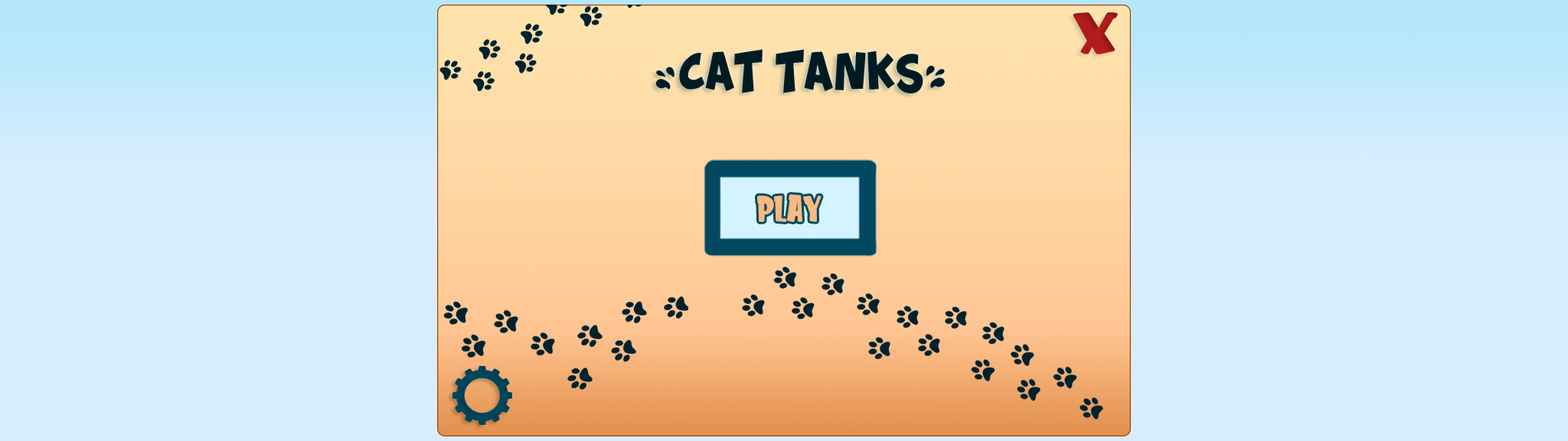
<style>
.page{position:relative;width:1568px;height:441px;background:#d8eeff}
.page>*{position:absolute;margin:0}
.t1{font:57.1px "KidsZone";color:#b11c1c;scale:1.56 1}
.t2{font:30.6px "Splatch";color:#011a22}
.t3{font:35.8px "KidsZone";color:#f9b982}
</style>
<div class="page">
<p class="t1" style="left:1073px;top:12px;width:45px;height:42px">x</p>
<p class="t2" style="left:655px;top:49px;width:290px;height:44px">&lt;CAT TANKS&gt;</p>
<p class="t3" style="left:757px;top:194px;width:65px;height:28px">play</p>
</div>
